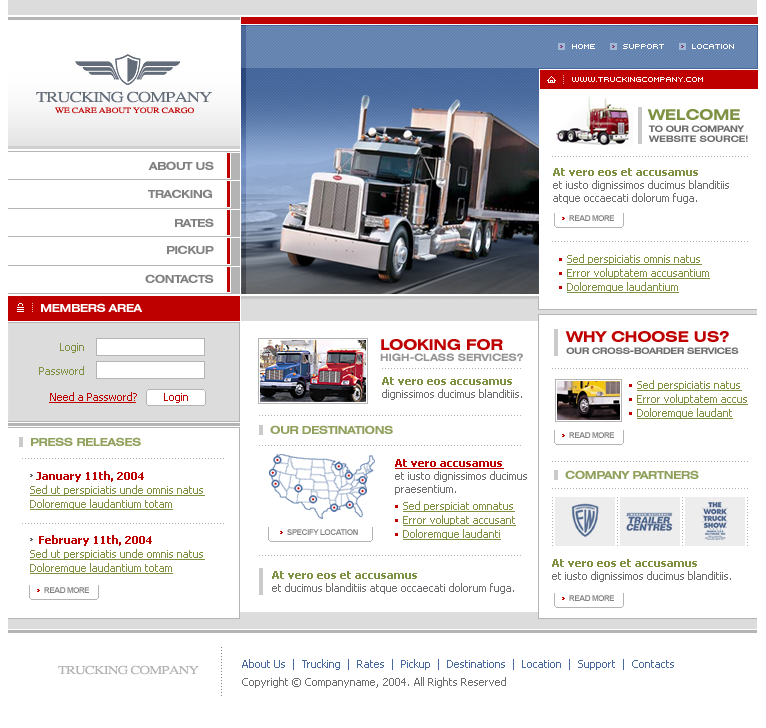
<style>
.page{position:relative;width:766px;height:728px;background:#ffffff}
.page>*{position:absolute;margin:0}
.t1{font:8px "Kroeger0853";color:#ffffff;text-transform:uppercase}
.t2{font:15px "XeroxSerifWideFC";letter-spacing:-0.05em;color:#636c79;text-transform:uppercase}
.t3{font:8px "XeroxSerifWideFC";letter-spacing:-0.025em;color:#bf0000;text-transform:uppercase}
.t4{font:15px "Swiss721BT-BoldExtended";letter-spacing:-0.025em;color:#7f9244;text-transform:uppercase}
.t5{font:9px/10px "Swiss721BT-BoldExtended";letter-spacing:-0.025em;color:#6e6e6e;text-transform:uppercase}
.t6{font:9px/10px "Swiss721BT-BoldExtended";letter-spacing:-0.05em;color:#6e6e6e;text-transform:uppercase}
.t7{font:11px "Swiss721BT-BoldExtended";letter-spacing:-0.05em;color:#818181;text-transform:uppercase}
.t8{font:11px/13px "Tahoma";color:#6e6e6e}
.t9{font:11px/13px "Tahoma-Bold";color:#7f9244}
.t10{font:8px "Arial-BoldMT";letter-spacing:-0.05em;color:#818181}
.t11{font:11px/14px "Tahoma";color:#7f9244;text-decoration:underline}
.t12{font:11px "Swiss721BT-BoldExtended";letter-spacing:-0.05em;color:#ffffff;text-transform:uppercase}
.t13{font:15px "Swiss721BT-BoldExtended";letter-spacing:-0.025em;color:#bf0000;text-transform:uppercase}
.t14{font:11px/24px "Tahoma";color:#7f9244}
.t15{font:10px "Swiss721BT-BoldExtended";letter-spacing:-0.025em;color:#959595;text-transform:uppercase}
.t16{font:9px "Swiss721BT-BoldExtended";letter-spacing:-0.05em;color:#6e6e6e;text-transform:uppercase}
.t17{font:11px "Tahoma";color:#bf0000}
.t18{font:11px "Swiss721BT-BoldExtended";letter-spacing:-0.05em;color:#90a15d;text-transform:uppercase}
.t19{font:11px/13px "Tahoma-Bold";color:#bf0000;text-decoration:underline}
.t20{font:11px/14px "Tahoma-Bold";color:#bf0000}
.t21{font:8px "Arial-BoldMT";letter-spacing:-0.05em;color:#818181;text-transform:uppercase}
.t22{font:12px "XeroxSerifWideFC";letter-spacing:-0.05em;color:#b1b1b1;text-transform:uppercase}
.t23{font:11px/18px "Tahoma";color:#48699d}
.t24{font:11px/18px "Tahoma";color:#6e6e6e}
</style>
<div class="page">
<p class="t1" style="left:572px;top:44px;width:162px;height:5px">home         support         location</p>
<p class="t1" style="left:572px;top:77px;width:131px;height:5px">www.truckingcompany.com</p>
<p class="t2" style="left:36px;top:91px;width:176px;height:12px">Trucking Company</p>
<p class="t3" style="left:55px;top:107px;width:139px;height:7px">WE care about your cargo</p>
<p class="t4" style="left:647px;top:109px;width:93px;height:11px">Welcome</p>
<p class="t5" style="left:648px;top:125px;width:100px;height:17px"><span class="t6">to our company<br></span>website source!</p>
<p class="t7" style="left:148px;top:161px;width:66px;height:9px">about us</p>
<p class="t8" style="left:553px;top:168px;width:176px;height:36px"><span class="t9">At vero eos et accusamus<br></span>et iusto dignissimos ducimus blanditiis atque occaecati dolorum fuga.</p>
<p class="t7" style="left:148px;top:189px;width:64px;height:9px">TRACKING</p>
<p class="t7" style="left:175px;top:218px;width:39px;height:9px">RATES</p>
<p class="t10" style="left:569px;top:215px;width:45px;height:6px">READ MORE</p>
<p class="t7" style="left:167px;top:245px;width:47px;height:9px">PICKUP</p>
<p class="t11" style="left:567px;top:254px;width:143px;height:39px">Sed perspiciatis omnis natus<br>Error voluptatem accusantium<br>Doloremque laudantium</p>
<p class="t7" style="left:145px;top:274px;width:69px;height:9px">contacts</p>
<p class="t12" style="left:41px;top:303px;width:102px;height:9px">members area</p>
<p class="t13" style="left:381px;top:339px;width:122px;height:11px">Looking for</p>
<p class="t13" style="left:565px;top:331px;width:164px;height:11px">WHy Choose us?</p>
<p class="t14" style="left:39px;top:343px;width:45px;height:32px;text-align:right">Login<br>Password</p>
<p class="t15" style="left:380px;top:353px;width:143px;height:8px">high-class services?</p>
<p class="t16" style="left:566px;top:347px;width:173px;height:7px">our cross-boarder services</p>
<p class="t8" style="left:382px;top:377px;width:140px;height:23px"><span class="t9">At vero eos accusamus<br></span>dignissimos ducimus blanditiis.</p>
<p class="t11" style="left:637px;top:380px;width:111px;height:39px">Sed perspiciatis natus<br>Error voluptatem accus<br>Doloremque laudant</p>
<p class="t17" style="left:50px;top:392px;width:87px;height:9px">Need a Password?</p>
<p class="t17" style="left:164px;top:393px;width:24px;height:10px">Login</p>
<p class="t18" style="left:270px;top:425px;width:123px;height:9px">oUR DESTINATIONS</p>
<p class="t18" style="left:31px;top:437px;width:110px;height:9px">press releases</p>
<p class="t10" style="left:569px;top:432px;width:45px;height:6px">READ MORE</p>
<p class="t8" style="left:395px;top:459px;width:132px;height:36px"><span class="t19">At vero accusamus<br></span>et iusto dignissimos ducimus praesentium.</p>
<p class="t11" style="left:30px;top:471px;width:175px;height:39px"><span class="t20">  January 11th, 2004<br></span>Sed ut perspiciatis unde omnis natus<br>Doloremque laudantium totam</p>
<p class="t18" style="left:565px;top:470px;width:134px;height:9px">company partners</p>
<p class="t11" style="left:403px;top:501px;width:113px;height:39px">Sed perspiciat omnatus<br>Error voluptat accusant<br>Doloremque laudanti</p>
<p class="t21" style="left:287px;top:529px;width:71px;height:6px">specify location</p>
<p class="t11" style="left:30px;top:535px;width:175px;height:39px"><span class="t20">   February 11th, 2004<br></span>Sed ut perspiciatis unde omnis natus<br>Doloremque laudantium totam</p>
<p class="t8" style="left:552px;top:559px;width:179px;height:23px"><span class="t9">At vero eos et accusamus<br></span>et iusto dignissimos ducimus blanditiis.</p>
<p class="t8" style="left:272px;top:571px;width:242px;height:23px"><span class="t9">At vero eos et accusamus<br></span>et ducimus blanditiis atque occaecati dolorum fuga.</p>
<p class="t10" style="left:44px;top:587px;width:45px;height:6px">READ MORE</p>
<p class="t10" style="left:569px;top:595px;width:45px;height:6px">READ MORE</p>
<p class="t22" style="left:58px;top:665px;width:141px;height:10px">Trucking Company</p>
<p class="t23" style="left:242px;top:659px;width:432px;height:29px">About Us  |  Trucking  |  Rates  |  Pickup  |  Destinations  |  Location  |  Support  |  Contacts<br><span class="t24">Copyright © Companyname, 2004. All Rights Reserved</span></p>
</div>
